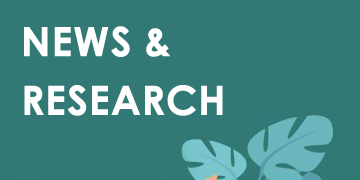
<style>
.page{position:relative;width:360px;height:180px;background:#327975}
.page>*{position:absolute;margin:0}
.t1{font:40px "CenturyGothic-Bold";color:#ffffff;font-weight:bold}
</style>
<div class="page">
<p class="t1" style="left:24px;top:26px;width:199px;height:90px">NEWS &amp;<br>RESEARCH</p>
</div>
